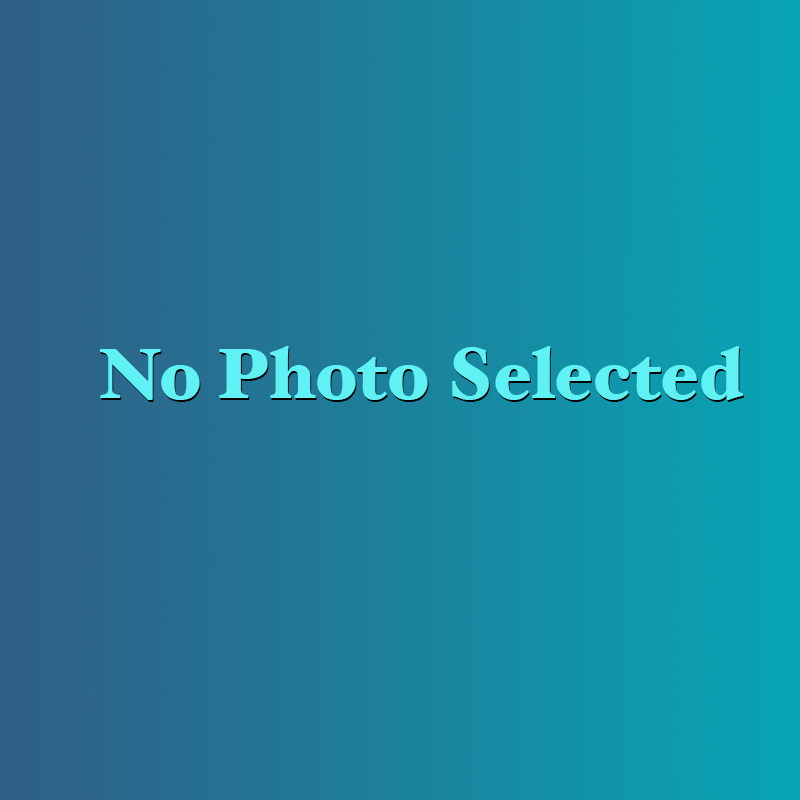
<style>
.page{position:relative;width:800px;height:800px}
.page>*{position:absolute;margin:0}
.t1{font:72px "HoeflerText-Black";color:#5ff1f3}
</style>
<div class="page">
<p class="t1" style="left:99px;top:346px;width:644px;height:54px">No Photo Selected</p>
<p class="t1" style="left:100px;top:348px;width:644px;height:54px">No Photo Selected</p>
</div>
